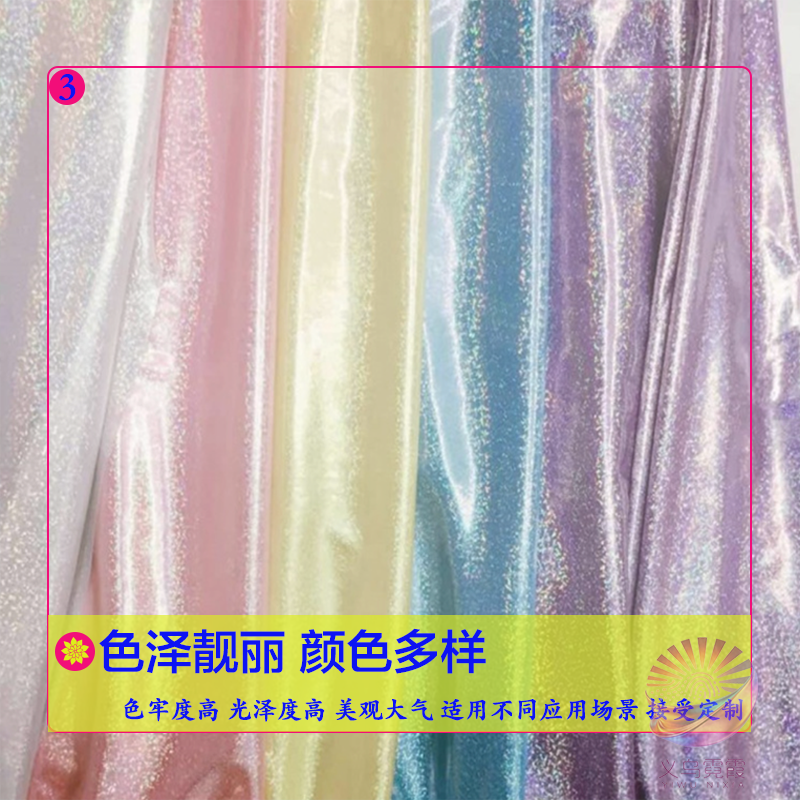
<style>
.page{position:relative;width:800px;height:800px}
.page>*{position:absolute;margin:0}
.t1{font:40px "STKaitiSC-Black";color:#0d13f3}
.t2{font:47px "FZLTZHK--GBK1-0";color:#0d13f3}
.t3{font:25px "STKaitiSC-Black";color:#0d13f3}
</style>
<div class="page">
<p class="t1" style="left:59px;top:74px;width:17px;height:27px">3</p>
<p class="t2" style="left:99px;top:628px;width:387px;height:46px">色泽靓丽 颜色多样</p>
<p class="t3" style="left:124px;top:697px;width:619px;height:25px">色牢度高 光泽度高 美观大气 适用不同应用场景 接受定制</p>
</div>
